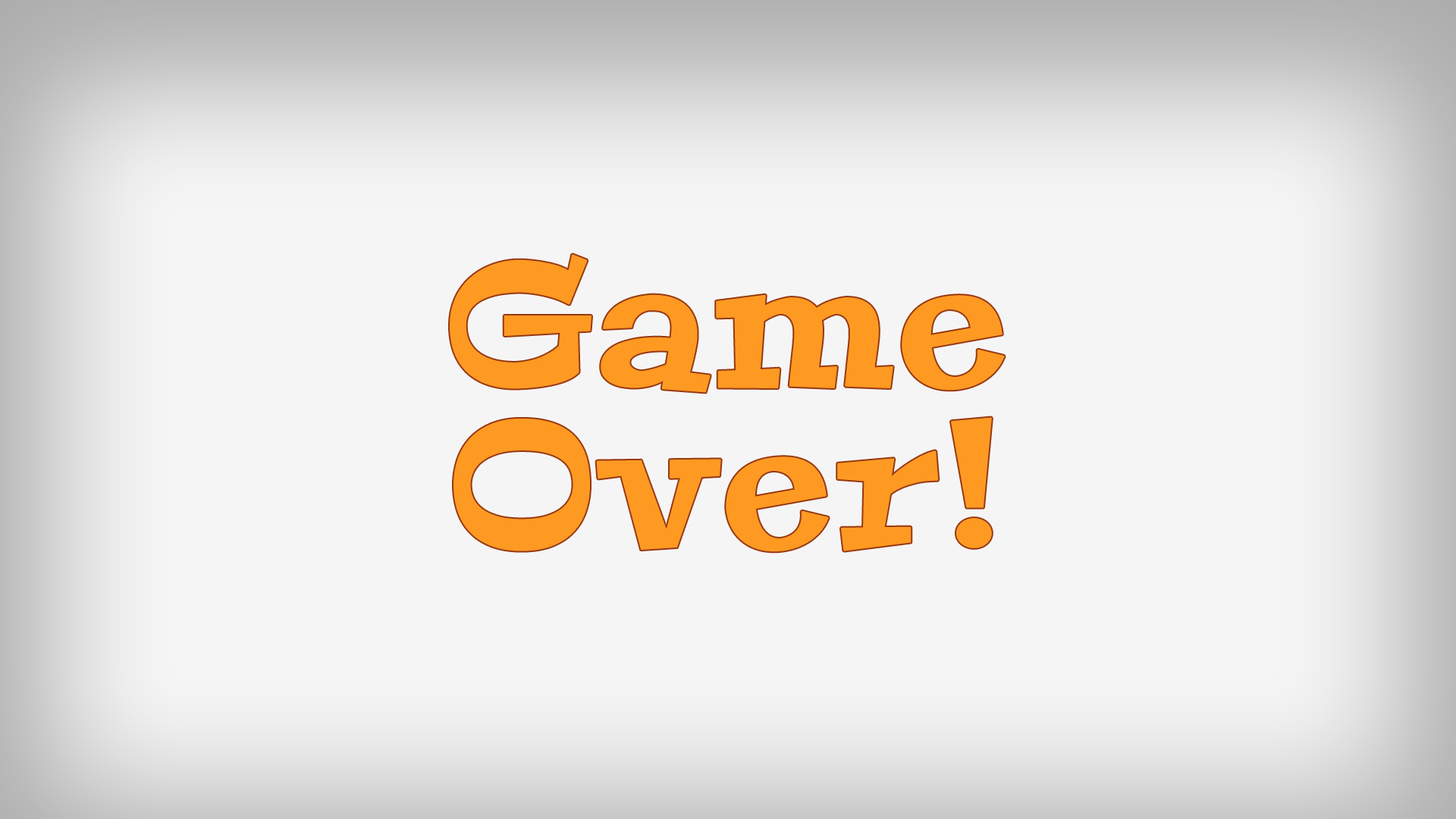
<style>
.page{position:relative;width:1456px;height:819px;background:#f6f5f5}
.page>*{position:absolute;margin:0}
.t1{font:175.9px/161.5px "Peralta-Regular";color:#fe9a22;font-weight:bold}
.t2{font:175.9px "Peralta-Regular";color:#fe9a22;font-weight:bold}
</style>
<div class="page">
<p class="t1" style="left:450px;top:254px;width:555px;height:298px;text-align:center"><span class="t2"><br></span>Game <br>Over!</p>
</div>
